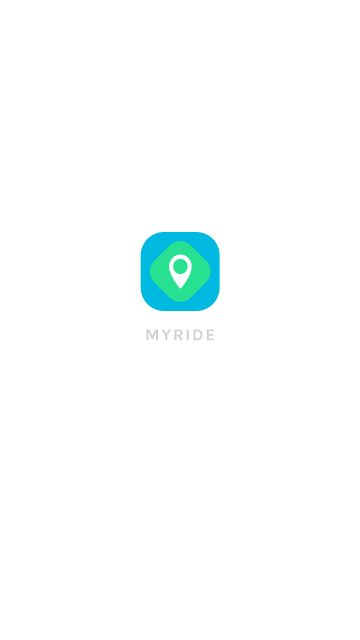
<style>
.page{position:relative;width:360px;height:640px;background:#ffffff}
.page>*{position:absolute;margin:0}
.t1{font:16.7px "Karla-Bold";letter-spacing:0.1em;color:#d1d1d3;text-transform:uppercase}
</style>
<div class="page">
<p class="t1" style="left:146px;top:329px;width:68px;height:12px">MyRide</p>
</div>
